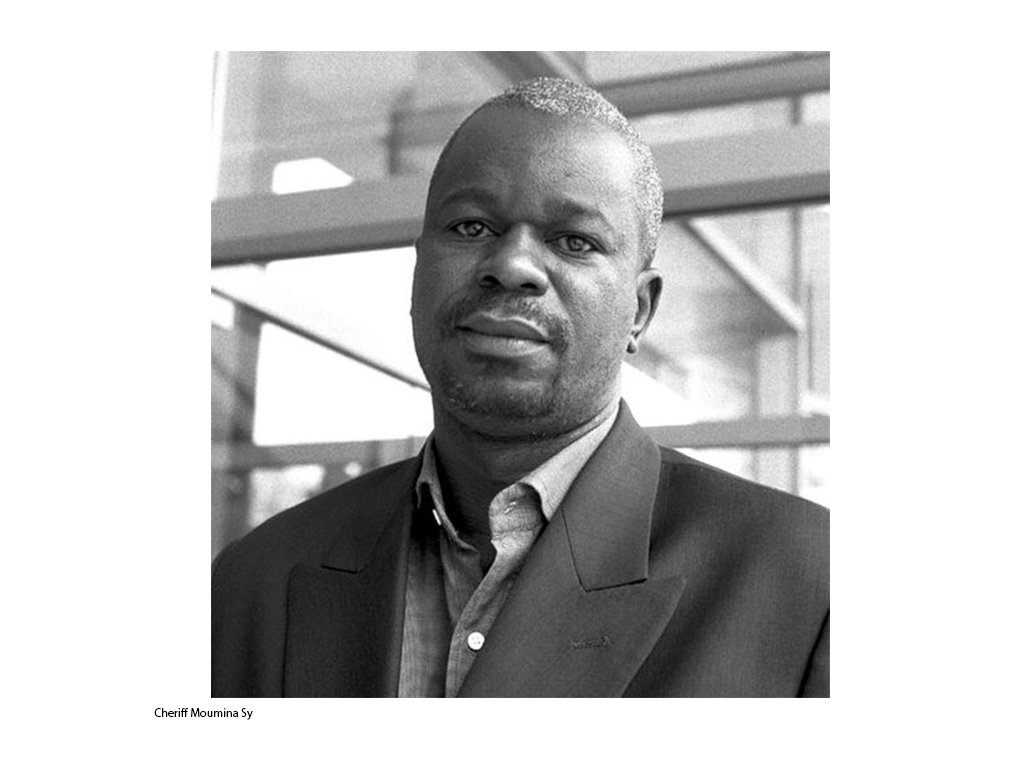
<style>
.page{position:relative;width:1024px;height:768px;background:#ffffff}
.page>*{position:absolute;margin:0}
.t1{font:12px "MyriadPro-Regular";color:#000000}
</style>
<div class="page">
<p class="t1" style="left:154px;top:708px;width:99px;height:12px">Cheriff Moumina Sy</p>
</div>
